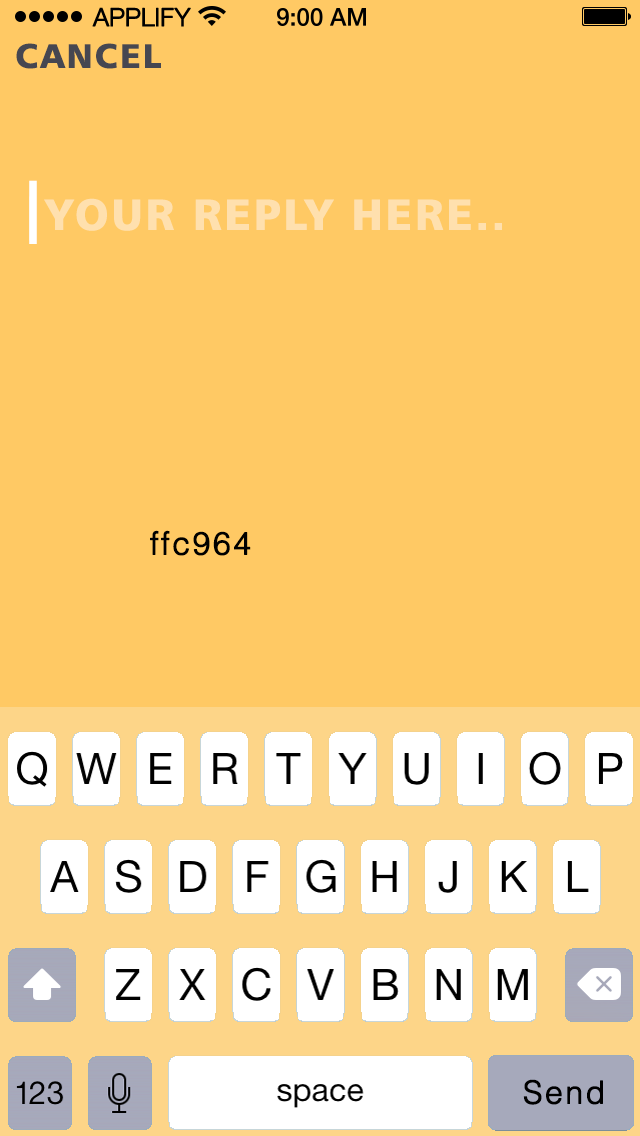
<style>
.page{position:relative;width:640px;height:1136px;background:#ffc964}
.page>*{position:absolute;margin:0}
.t1{font:25px "HelveticaNeueLTCom-Lt";letter-spacing:-0.02em;color:#000000;font-weight:bold}
.t2{font:58.3px "Humanist777BT-BlackB";letter-spacing:0.06em;color:#464751}
.t3{font:108.3px "Humanist777BT-BlackB";letter-spacing:0.06em;color:#ffffff}
.t4{font:75px "Humanist777BT-BlackB";letter-spacing:0.06em;color:#ffe0ae}
.t5{font:54.2px "HelveticaLTStd-Light";letter-spacing:0.06em;color:#000000;font-weight:bold}
</style>
<div class="page">
<p class="t1" style="left:92px;top:7px;width:99px;height:20px">APPLIFY</p>
<p class="t2" style="left:16px;top:43px;width:145px;height:26px">CANCEL</p>
<p class="t3" style="left:29px;top:180px;width:8px;height:64px">|</p>
<p class="t4" style="left:29px;top:196px;width:473px;height:45px">|YOUR REPLY HERE..</p>
<p class="t5" style="left:150px;top:530px;width:101px;height:26px">ffc964</p>
<p class="t5" style="left:523px;top:1079px;width:80px;height:26px">Send</p>
</div>
